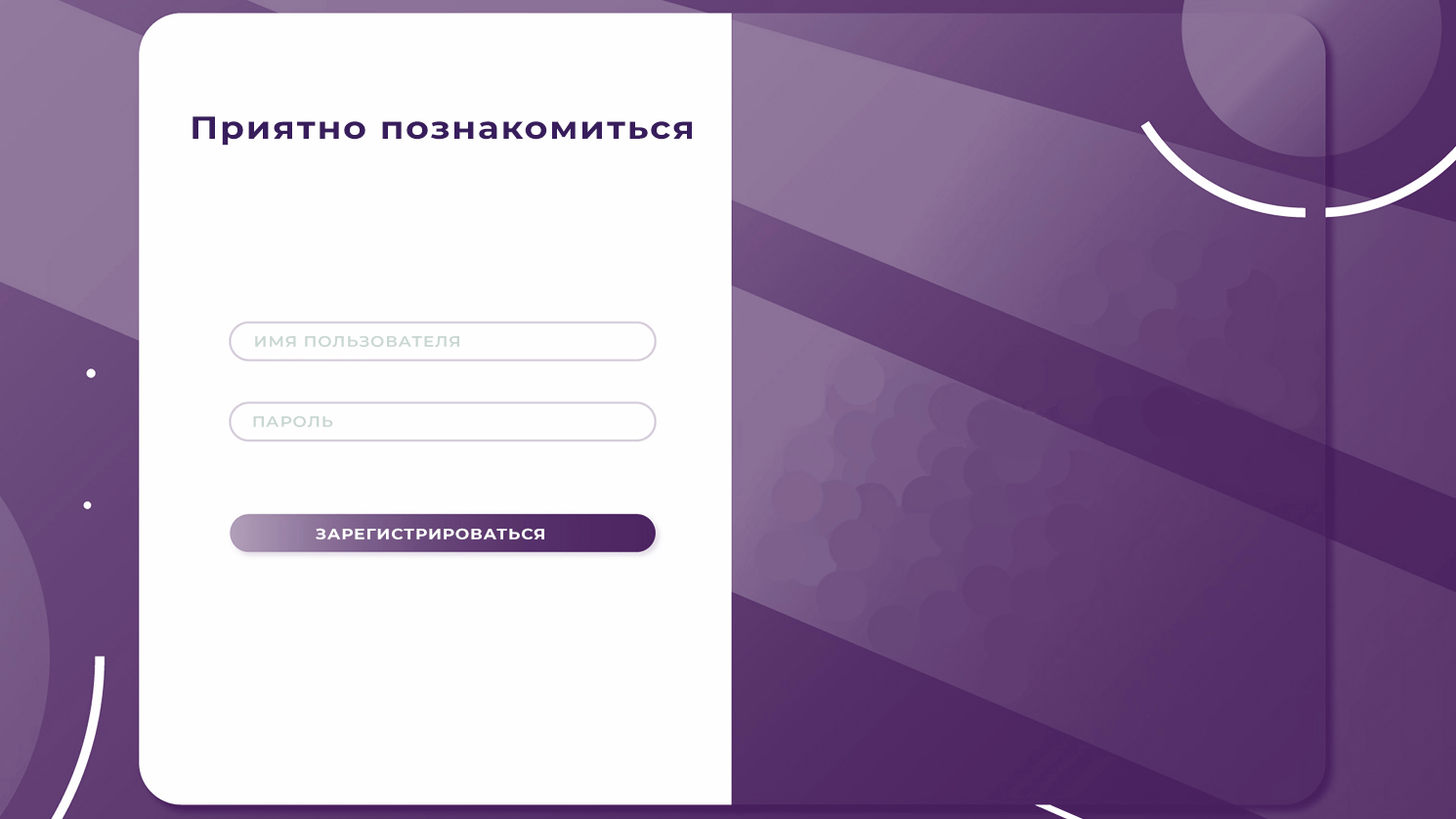
<style>
.page{position:relative;width:1456px;height:819px;background:#fefefe}
.page>*{position:absolute;margin:0}
.t1{font:31.7px "Montserrat-Bold";letter-spacing:0.05em;color:#381d5c;scale:1.11 1}
.t2{font:15px "Montserrat-SemiBold";letter-spacing:0.05em;color:#c8d6d0;scale:1.11 1}
.t3{font:15px "Montserrat-Bold";letter-spacing:0.05em;color:#ffffff;scale:1.11 1}
</style>
<div class="page">
<p class="t1" style="left:193px;top:116px;width:499px;height:30px">Приятно познакомиться</p>
<p class="t2" style="left:255px;top:335px;width:204px;height:12px">ИМЯ ПОЛЬЗОВАТЕЛЯ</p>
<p class="t2" style="left:253px;top:415px;width:80px;height:12px">ПАРОЛЬ</p>
<p class="t3" style="left:316px;top:528px;width:228px;height:11px">ЗАРЕГИСТРИРОВАТЬСЯ</p>
</div>
